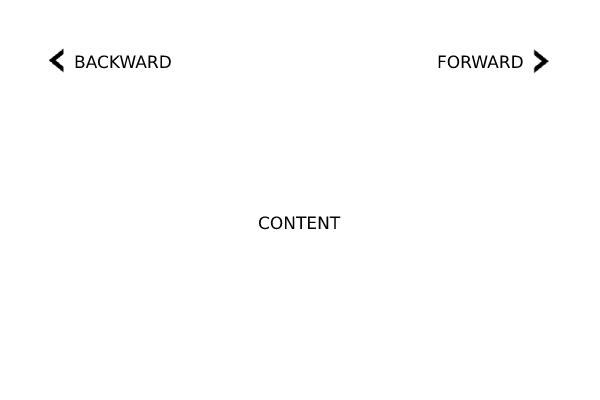
<style>
.page{position:relative;width:600px;height:400px;background:#ffffff}
.page>*{position:absolute;margin:0}
.t1{font:17px "DejaVuSans";color:#000000}
</style>
<div class="page">
<p class="t1" style="left:75px;top:55px;width:96px;height:14px">BACKWARD</p>
<p class="t1" style="left:438px;top:55px;width:85px;height:14px">FORWARD</p>
<p class="t1" style="left:258px;top:216px;width:83px;height:14px">CONTENT</p>
</div>
